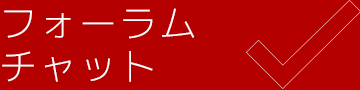
<style>
.page{position:relative;width:360px;height:90px;background:#b50000}
.page>*{position:absolute;margin:0}
.t1{font:38px/43px "mplus-1c-light";letter-spacing:0.05em;color:#fefefe}
</style>
<div class="page">
<p class="t1" style="left:2px;top:8px;width:193px;height:74px">フォーラム<br>チャット</p>
</div>
